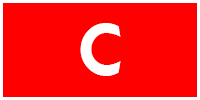
<style>
.page{position:relative;width:200px;height:100px;background:#ff0000}
.page>*{position:absolute;margin:0}
.t1{font:72px "ELEGANCE";color:#ffffff}
</style>
<div class="page">
<p class="t1" style="left:80px;top:23px;width:41px;height:53px">C</p>
</div>
